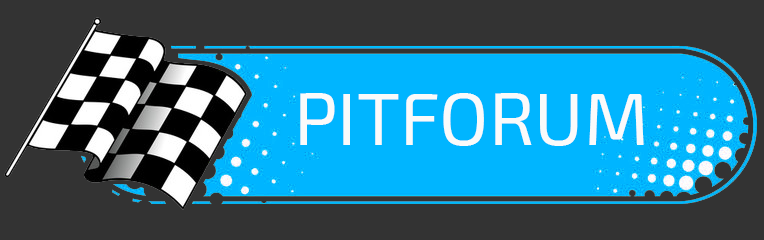
<style>
.page{position:relative;width:764px;height:240px;background:#333333}
.page>*{position:absolute;margin:0}
.t1{font:74px "Exo2-Regular";color:#fafafa}
</style>
<div class="page">
<p class="t1" style="left:300px;top:93px;width:344px;height:53px">PITFORUM</p>
</div>
